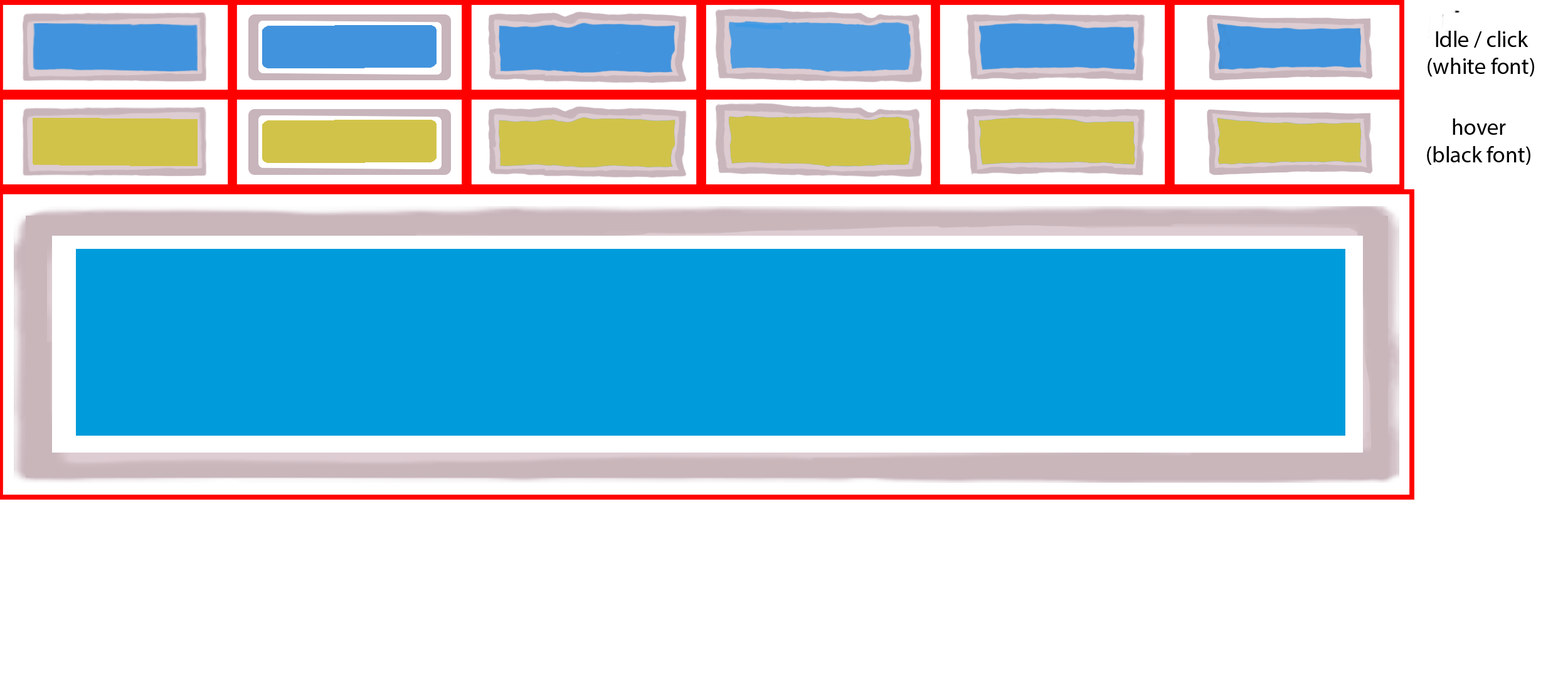
<style>
.page{position:relative;width:1568px;height:677px;background:#ffffff}
.page>*{position:absolute;margin:0}
.t1{font:22.6px "MyriadPro-Regular";color:#000000}
</style>
<div class="page">
<p class="t1" style="left:1428px;top:31px;width:106px;height:46px;text-align:center">Idle / click<br>(white font)</p>
<p class="t1" style="left:1427px;top:119px;width:103px;height:46px;text-align:center">hover<br>(black font)</p>
</div>
